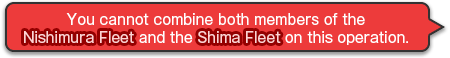
<style>
.page{position:relative;width:450px;height:58px;background:#ed3b3b}
.page>*{position:absolute;margin:0}
.t1{font:14px/18px "GothicMB101Pro-Regular";color:#ffffff}
.t2{font:14px/18px "GothicMB101Pro-Regular";color:#ffd3d3}
</style>
<div class="page">
<p class="t1" style="left:24px;top:13px;width:384px;height:32px;text-align:center">You cannot combine both members of the<br><span class="t2">Nishimura Fleet </span>and the <span class="t2">Shima Fleet</span> on this operation.</p>
<p class="t1" style="left:24px;top:13px;width:384px;height:32px;text-align:center">You cannot combine both members of the<br><span class="t2">Nishimura Fleet </span>and the <span class="t2">Shima Fleet</span> on this operation.</p>
</div>
